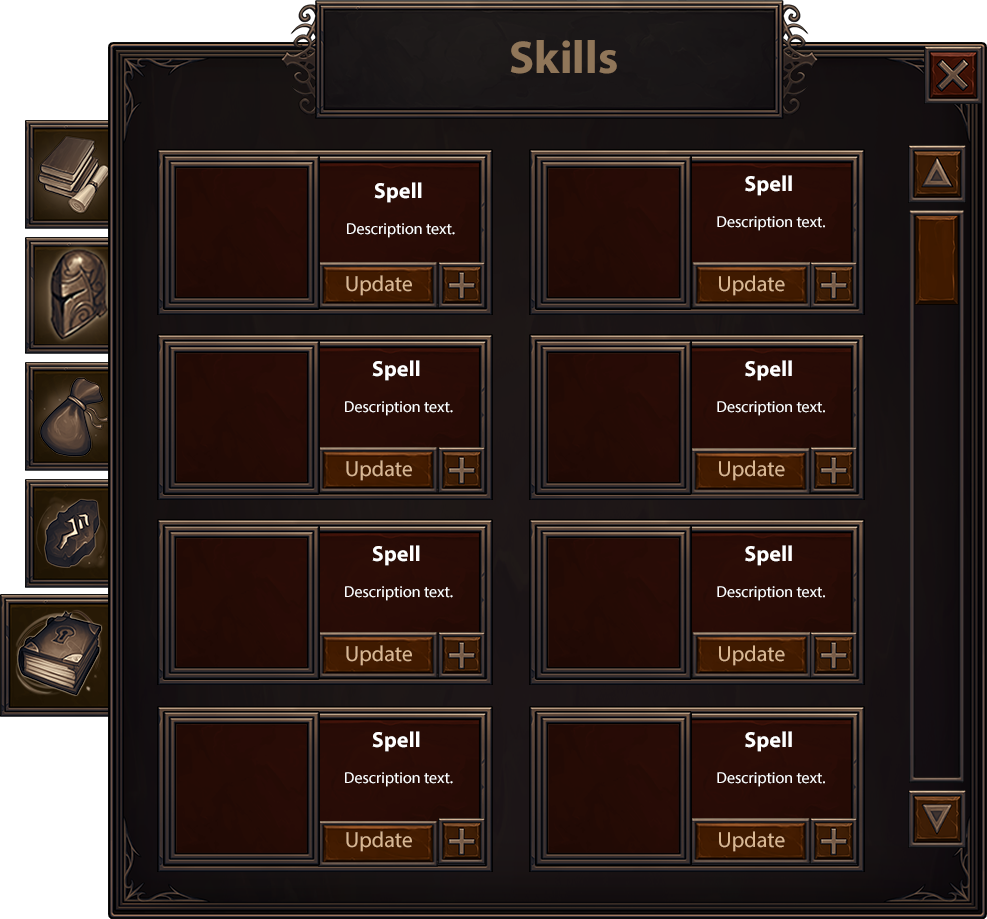
<style>
.page{position:relative;width:987px;height:919px}
.page>*{position:absolute;margin:0}
.t1{font:46.3px "MyriadPro-Bold";color:#907659}
.t2{font:21.8px "MyriadPro-Bold";color:#ffffff}
.t3{font:15.8px "MyriadPro-Regular";color:#ffffff}
.t4{font:21.8px "MyriadPro-Regular";color:#d9b792}
</style>
<div class="page">
<p class="t1" style="left:510px;top:40px;width:107px;height:34px">Skills</p>
<p class="t2" style="left:374px;top:182px;width:48px;height:21px">Spell</p>
<p class="t2" style="left:745px;top:175px;width:47px;height:21px">Spell</p>
<p class="t3" style="left:717px;top:216px;width:108px;height:15px">Description text.</p>
<p class="t3" style="left:347px;top:223px;width:108px;height:15px">Description text.</p>
<p class="t4" style="left:346px;top:275px;width:66px;height:21px">Update</p>
<p class="t4" style="left:719px;top:275px;width:66px;height:21px">Update</p>
<p class="t2" style="left:372px;top:360px;width:48px;height:21px">Spell</p>
<p class="t2" style="left:745px;top:360px;width:47px;height:21px">Spell</p>
<p class="t3" style="left:345px;top:401px;width:108px;height:15px">Description text.</p>
<p class="t3" style="left:717px;top:401px;width:108px;height:15px">Description text.</p>
<p class="t4" style="left:346px;top:460px;width:66px;height:21px">Update</p>
<p class="t4" style="left:719px;top:460px;width:66px;height:21px">Update</p>
<p class="t2" style="left:372px;top:545px;width:48px;height:21px">Spell</p>
<p class="t2" style="left:745px;top:545px;width:47px;height:21px">Spell</p>
<p class="t3" style="left:345px;top:586px;width:108px;height:15px">Description text.</p>
<p class="t3" style="left:717px;top:586px;width:108px;height:15px">Description text.</p>
<p class="t4" style="left:346px;top:645px;width:66px;height:21px">Update</p>
<p class="t4" style="left:719px;top:645px;width:66px;height:21px">Update</p>
<p class="t2" style="left:372px;top:731px;width:48px;height:21px">Spell</p>
<p class="t2" style="left:745px;top:731px;width:47px;height:21px">Spell</p>
<p class="t3" style="left:345px;top:772px;width:108px;height:15px">Description text.</p>
<p class="t3" style="left:717px;top:772px;width:108px;height:15px">Description text.</p>
<p class="t4" style="left:346px;top:831px;width:66px;height:21px">Update</p>
<p class="t4" style="left:719px;top:831px;width:66px;height:21px">Update</p>
</div>
